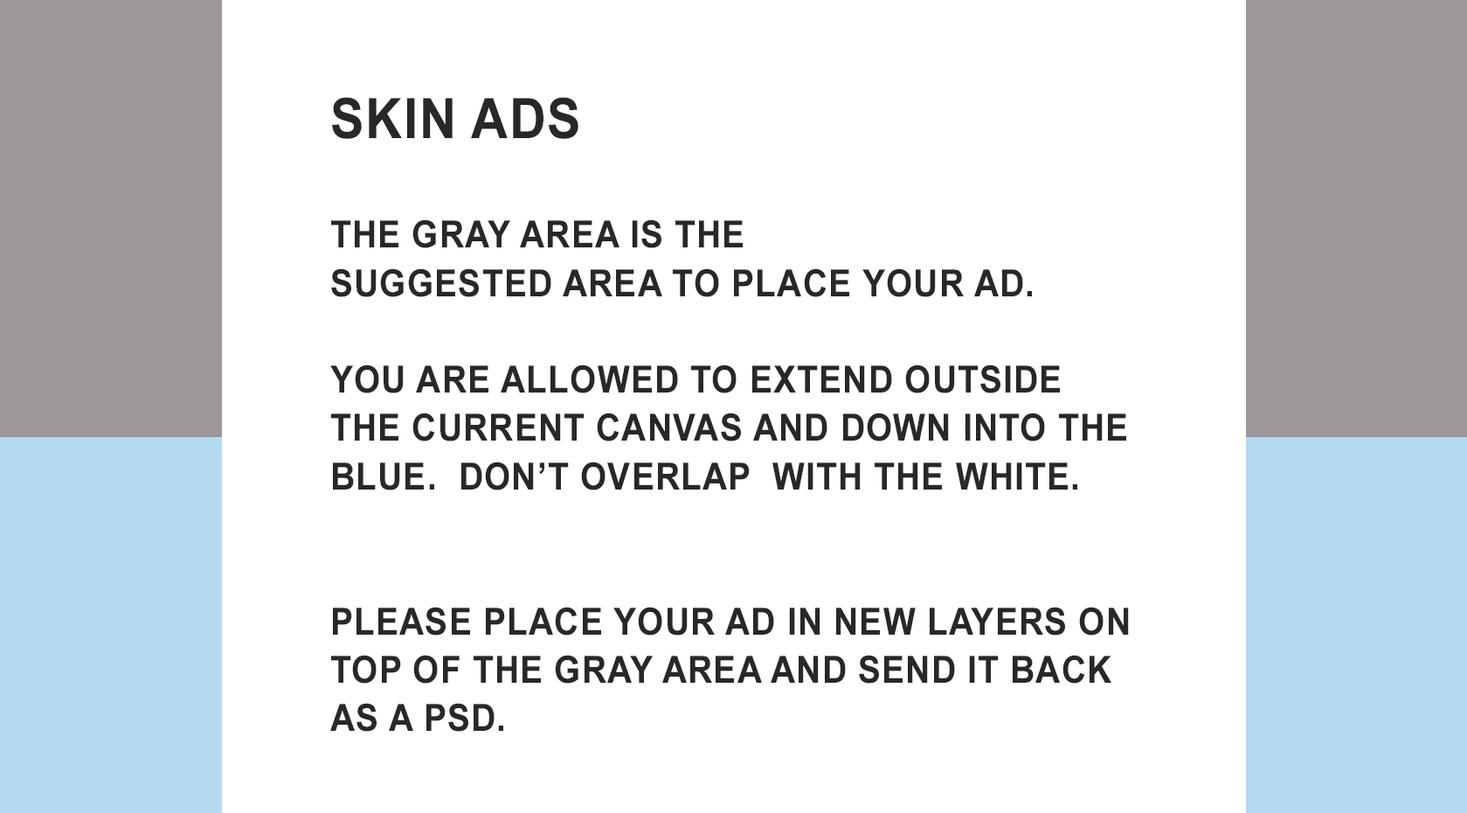
<style>
.page{position:relative;width:1467px;height:813px;background:#ffffff}
.page>*{position:absolute;margin:0}
.t1{font:55.8px "Arial-BoldMT";letter-spacing:0.03em;color:#282828;text-transform:uppercase;scale:0.91 1}
.t2{font:37.5px/48.3px "Arial-BoldMT";letter-spacing:0.03em;color:#282828;text-transform:uppercase;scale:0.91 1}
</style>
<div class="page">
<p class="t1" style="left:332px;top:97px;width:247px;height:42px">SKIN ADS</p>
<p class="t2" style="left:330px;top:219px;width:799px;height:512px">The gray area is the <br>suggested area to place your ad.  <br><br>You are allowed to extend outside the current canvas and down into the blue.  Don’t overlap  with the white.<br><br><br>Please Place your ad in new layers on top of the gray area and send it back as a PSD.</p>
</div>
